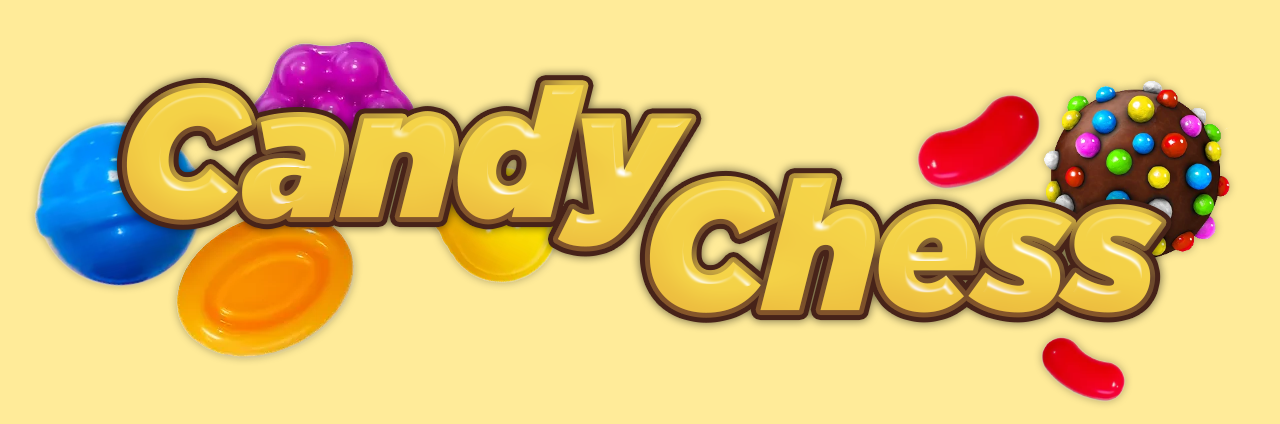
<style>
.page{position:relative;width:1280px;height:424px;background:#ffeb99}
.page>*{position:absolute;margin:0}
.t1{font:180.5px "Gotham-UltraItalic";color:#f4d147;scale:0.94 1}
</style>
<div class="page">
<p class="t1" style="left:126px;top:85px;width:566px;height:162px">Candy</p>
<p class="t1" style="left:649px;top:178px;width:513px;height:135px">Chess</p>
</div>
